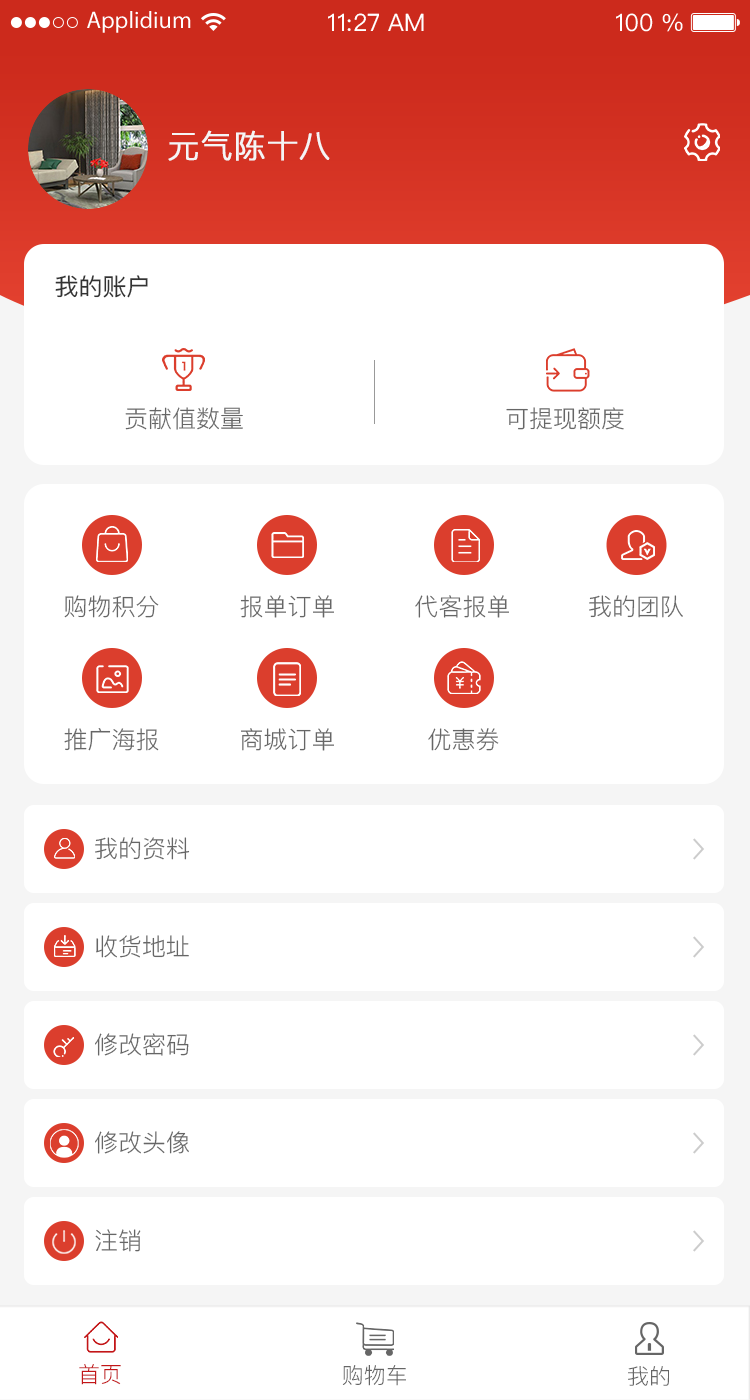
<style>
.page{position:relative;width:750px;height:1400px;background:#ffffff}
.page>*{position:absolute;margin:0}
.t1{font:32px "PingFang-SC-Regular";color:#f5f5f5;text-transform:uppercase;font-weight:bold}
.t2{font:24px "PingFang-SC-Medium";color:#333333;text-transform:uppercase}
.t3{font:24px "PingFang-SC-Regular";color:#666666;text-transform:uppercase}
.t4{font:22px "PingFang-SC-Regular";color:#c31618}
.t5{font:22px "PingFang-SC-Regular";color:#666666}
</style>
<div class="page">
<p class="t1" style="left:168px;top:130px;width:162px;height:31px">元气陈十八</p>
<p class="t2" style="left:55px;top:275px;width:93px;height:23px">我的账户</p>
<p class="t3" style="left:125px;top:407px;width:118px;height:23px">贡献值数量</p>
<p class="t3" style="left:506px;top:407px;width:118px;height:23px">可提现额度</p>
<p class="t3" style="left:64px;top:595px;width:95px;height:23px">购物积分</p>
<p class="t3" style="left:240px;top:595px;width:94px;height:23px">报单订单</p>
<p class="t3" style="left:415px;top:595px;width:94px;height:23px">代客报单</p>
<p class="t3" style="left:589px;top:595px;width:94px;height:23px">我的团队</p>
<p class="t3" style="left:64px;top:728px;width:95px;height:23px">推广海报</p>
<p class="t3" style="left:241px;top:728px;width:93px;height:23px">商城订单</p>
<p class="t3" style="left:428px;top:728px;width:71px;height:23px">优惠券</p>
<p class="t3" style="left:95px;top:837px;width:95px;height:23px">我的资料</p>
<p class="t3" style="left:96px;top:935px;width:93px;height:23px">收货地址</p>
<p class="t3" style="left:95px;top:1033px;width:94px;height:23px">修改密码</p>
<p class="t3" style="left:95px;top:1131px;width:94px;height:23px">修改头像</p>
<p class="t3" style="left:95px;top:1229px;width:46px;height:23px">注销</p>
<p class="t4" style="left:79px;top:1364px;width:42px;height:21px">首页</p>
<p class="t5" style="left:342px;top:1365px;width:64px;height:21px">购物车</p>
<p class="t5" style="left:628px;top:1366px;width:41px;height:20px">我的</p>
</div>
